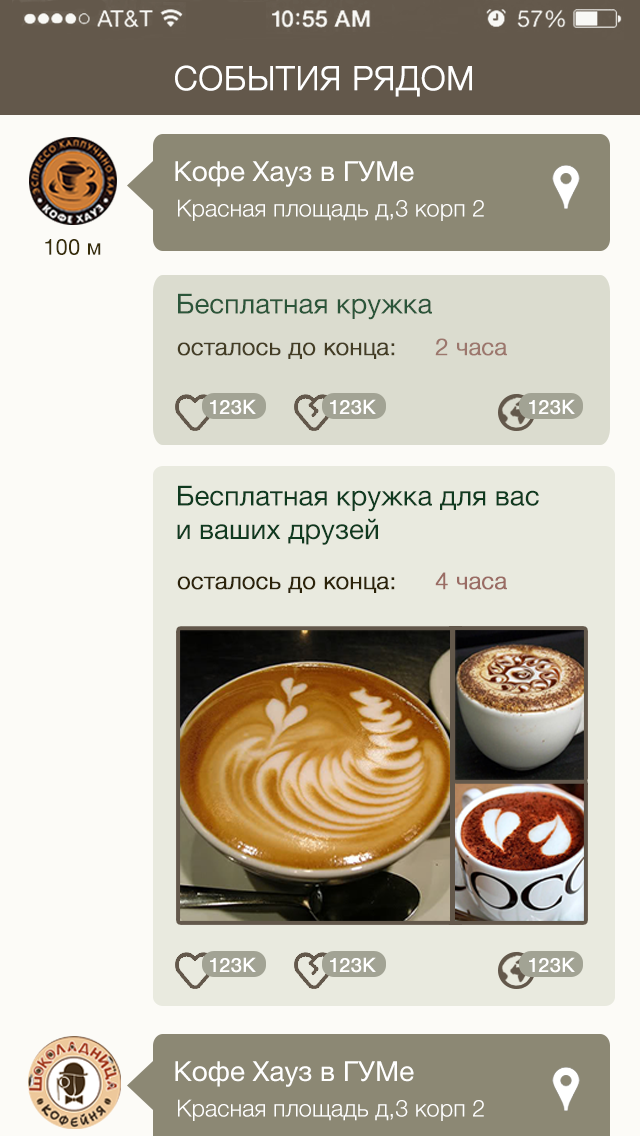
<style>
.page{position:relative;width:640px;height:1136px;background:#fcfbf7}
.page>*{position:absolute;margin:0}
.t1{font:33.3px "HelveticaNeue-Light";color:#ffffff;font-weight:bold}
.t2{font:27.8px "HelveticaNeue";color:#ffffff}
.t3{font:23.6px "HelveticaNeue-Light";color:#ffffff}
.t4{font:22.2px "HelveticaNeue";color:#382e09}
.t5{font:27.8px "HelveticaNeue";color:#2b563a}
.t6{font:23.6px "HelveticaNeue-Light";color:#443d24;font-weight:bold}
.t7{font:19.4px "HelveticaNeue";color:#ffffff;font-weight:bold}
.t8{font:27.8px "HelveticaNeue";color:#0f3a1f}
.t9{font:23.6px "HelveticaNeue-Light";color:#2c2309;font-weight:bold}
.t10{font:23.6px "HelveticaNeue-Light";color:#9a6c64;font-weight:bold}
</style>
<div class="page">
<p class="t1" style="left:175px;top:65px;width:297px;height:32px">СОБЫТИЯ РЯДОМ</p>
<p class="t2" style="left:175px;top:161px;width:239px;height:26px">Кофе Хауз в ГУМе</p>
<p class="t3" style="left:178px;top:199px;width:306px;height:22px">Красная площадь д,3 корп 2</p>
<p class="t4" style="left:45px;top:239px;width:56px;height:16px">100 м</p>
<p class="t5" style="left:178px;top:293px;width:254px;height:27px">Бесплатная кружка</p>
<p class="t6" style="left:177px;top:338px;width:330px;height:21px">осталось до конца:  2 часа</p>
<p class="t7" style="left:210px;top:399px;width:46px;height:16px">123К</p>
<p class="t7" style="left:330px;top:399px;width:46px;height:16px">123К</p>
<p class="t7" style="left:529px;top:399px;width:46px;height:16px">123К</p>
<p class="t8" style="left:177px;top:485px;width:362px;height:60px">Бесплатная кружка для вас<br>и ваших друзей</p>
<p class="t9" style="left:177px;top:572px;width:330px;height:21px">осталось до конца:  <span class="t10">4 часа</span></p>
<p class="t7" style="left:210px;top:957px;width:46px;height:16px">123К</p>
<p class="t7" style="left:330px;top:957px;width:46px;height:16px">123К</p>
<p class="t7" style="left:529px;top:957px;width:46px;height:16px">123К</p>
<p class="t2" style="left:175px;top:1061px;width:239px;height:26px">Кофе Хауз в ГУМе</p>
<p class="t3" style="left:178px;top:1099px;width:306px;height:22px">Красная площадь д,3 корп 2</p>
</div>
